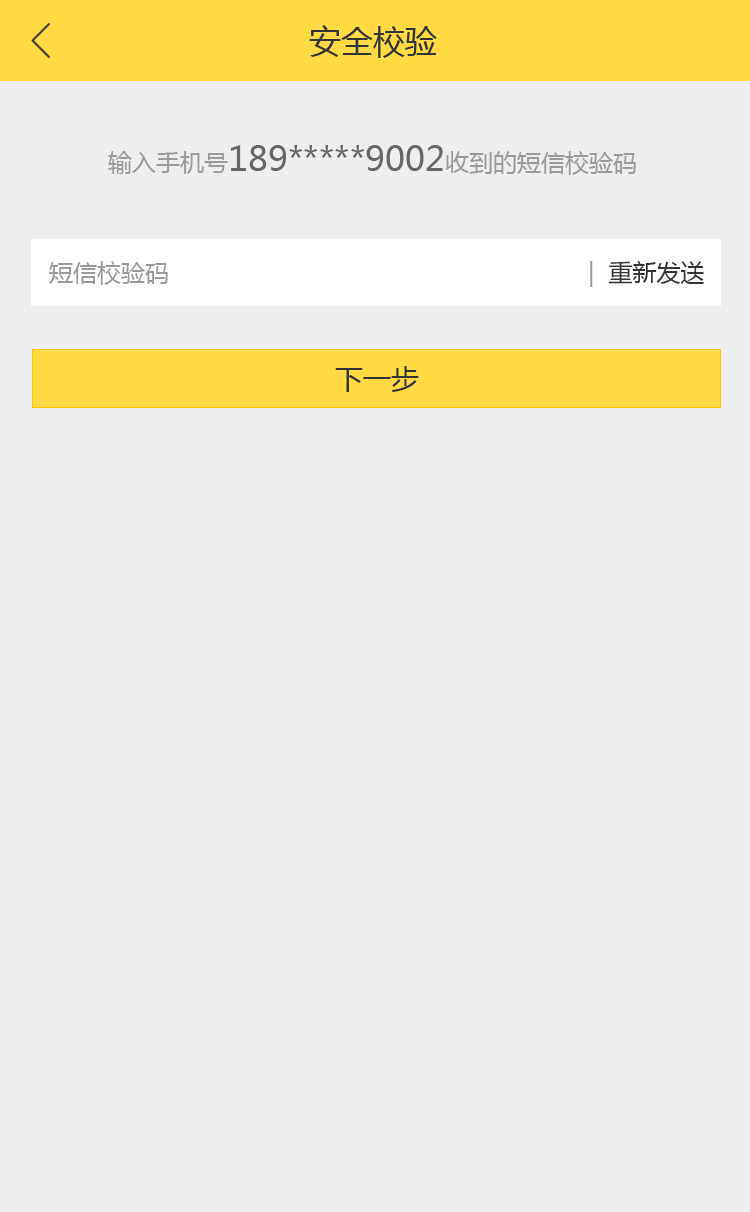
<style>
.page{position:relative;width:750px;height:1212px;background:#eeeeee}
.page>*{position:absolute;margin:0}
.t1{font:32px "MicrosoftYaHei";color:#333333}
.t2{font:34px "MicrosoftYaHei";color:#666666}
.t3{font:24px "MicrosoftYaHei";color:#999999}
.t4{font:24px "MicrosoftYaHei";color:#333333}
.t5{font:28px "MicrosoftYaHei";color:#333333}
</style>
<div class="page">
<p class="t1" style="left:309px;top:25px;width:128px;height:33px">安全校验</p>
<p class="t2" style="left:108px;top:145px;width:528px;height:30px"><span class="t3">输入手机号</span>189*****9002<span class="t3">收到的短信校验码</span></p>
<p class="t3" style="left:49px;top:261px;width:119px;height:24px">短信校验码</p>
<p class="t4" style="left:590px;top:261px;width:114px;height:26px"><span class="t3">| </span> 重新发送</p>
<p class="t5" style="left:335px;top:366px;width:84px;height:26px">下一步</p>
</div>
